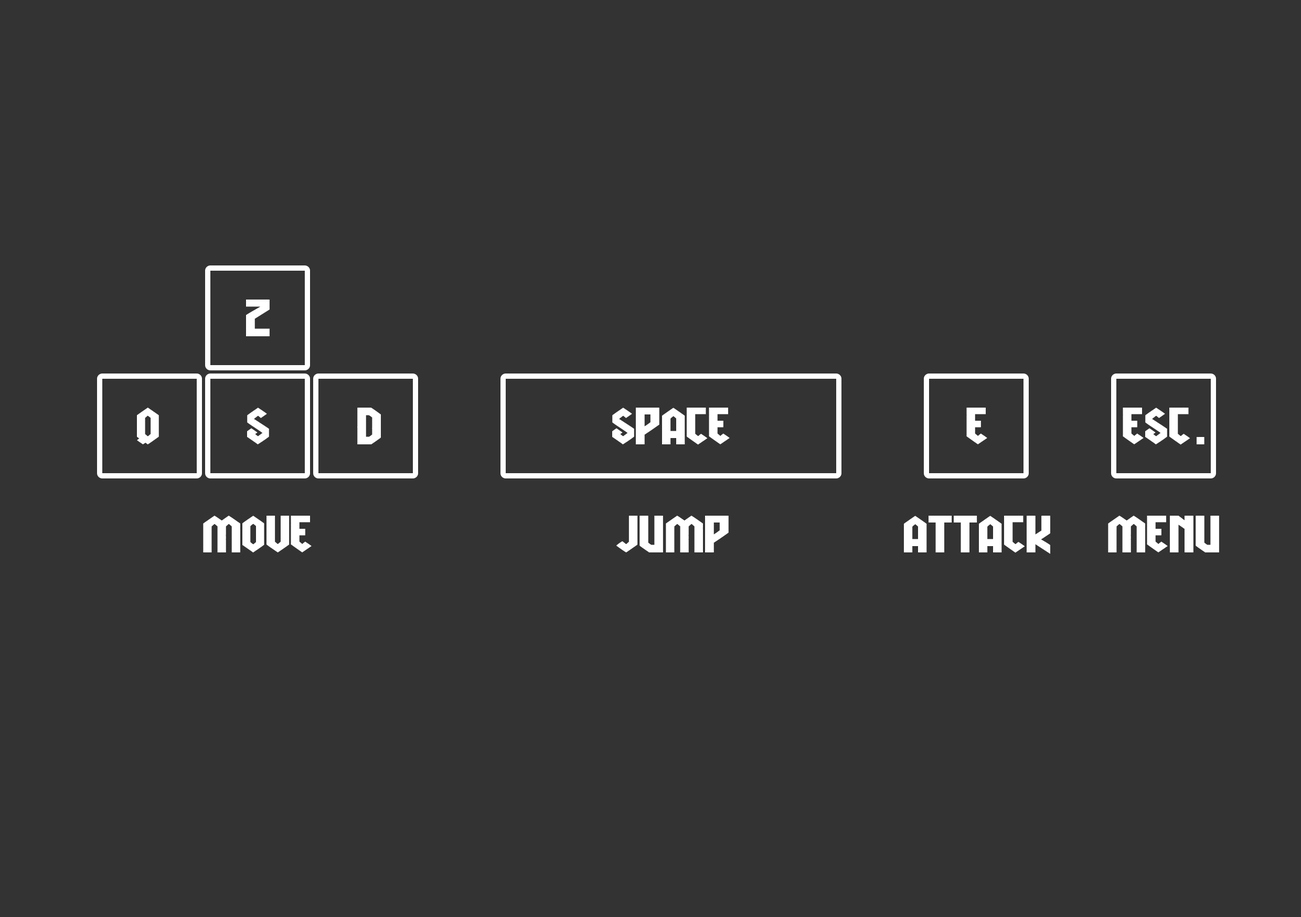
<style>
.page{position:relative;width:1301px;height:917px;background:#333333}
.page>*{position:absolute;margin:0}
.t1{font:52.4px "VikingHell";color:#ffffff}
</style>
<div class="page">
<p class="t1" style="left:246px;top:299px;width:24px;height:37px">Z</p>
<p class="t1" style="left:137px;top:408px;width:22px;height:36px">Q</p>
<p class="t1" style="left:247px;top:408px;width:22px;height:36px">S</p>
<p class="t1" style="left:357px;top:408px;width:24px;height:36px">D</p>
<p class="t1" style="left:612px;top:407px;width:118px;height:38px">SPACE</p>
<p class="t1" style="left:966px;top:408px;width:21px;height:36px">E</p>
<p class="t1" style="left:1122px;top:407px;width:82px;height:38px">ESC.</p>
<p class="t1" style="left:203px;top:516px;width:109px;height:36px">MOVE</p>
<p class="t1" style="left:616px;top:516px;width:112px;height:36px">JUMP</p>
<p class="t1" style="left:904px;top:515px;width:146px;height:39px">ATTACK</p>
<p class="t1" style="left:1108px;top:516px;width:111px;height:36px">MENU</p>
</div>
